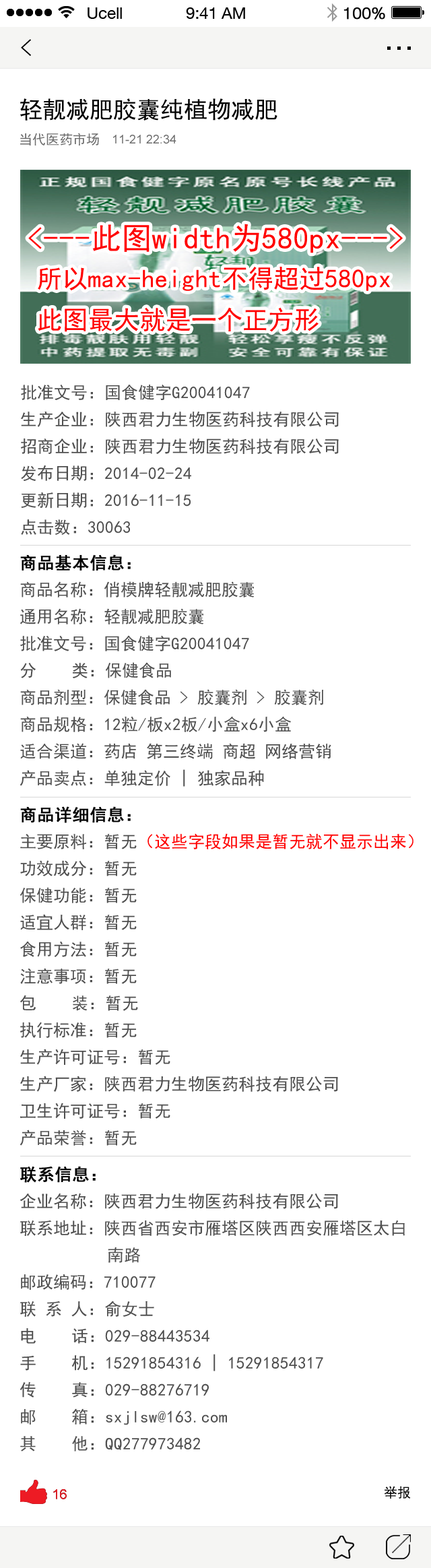
<style>
.page{position:relative;width:431px;height:1568px;background:#ffffff}
.page>*{position:absolute;margin:0}
.t1{font:23.6px "SimHei";color:#000000}
.t2{font:13.5px "SimHei";color:#6d6d6d}
.t3{font:12.1px "ArialMT";color:#6d6d6d}
.t4{font:30.5px "SimHei";color:#ff0000}
.t5{font:25.8px/41.2px "SimHei";color:#ff0000}
.t6{font:16.8px/26.9px "SimHei";color:#4f4f4f}
.t7{font:16.8px/26.9px "SimHei";color:#000000;font-weight:bold}
.t8{font:16.8px/26.9px "SimHei";color:#ff0000}
.t9{font:13.5px "ArialMT";color:#ed1b24}
.t10{font:13.5px "SimHei";color:#000000}
</style>
<div class="page">
<p class="t1" style="left:21px;top:39px;width:10px;height:17px">&lt;</p>
<p class="t1" style="left:20px;top:98px;width:257px;height:23px">轻靓减肥胶囊纯植物减肥</p>
<p class="t2" style="left:20px;top:133px;width:79px;height:12px">当代医药市场</p>
<p class="t3" style="left:113px;top:135px;width:63px;height:9px">11-21 22:34</p>
<p class="t4" style="left:28px;top:224px;width:375px;height:29px">&lt;---此图width为580px---&gt;</p>
<p class="t5" style="left:38px;top:267px;width:352px;height:65px">所以max-height不得超过580px<br>此图最大就是一个正方形</p>
<p class="t6" style="left:20px;top:385px;width:319px;height:150px">批准文号：国食健字G20041047<br>生产企业：陕西君力生物医药科技有限公司<br>招商企业：陕西君力生物医药科技有限公司<br>发布日期：2014-02-24<br>更新日期：2016-11-15<br>点击数：30063</p>
<p class="t6" style="left:20px;top:554px;width:311px;height:233px"><span class="t7">商品基本信息：<br></span>商品名称：俏模牌轻靓减肥胶囊<br>通用名称：轻靓减肥胶囊<br>批准文号：国食健字G20041047<br>分    类：保健食品<br>商品剂型：保健食品 &gt; 胶囊剂 &gt; 胶囊剂<br>商品规格：12粒/板x2板/小盒x6小盒<br>适合渠道：药店 第三终端 商超 网络营销<br>产品卖点：单独定价 | 独家品种</p>
<p class="t6" style="left:20px;top:806px;width:394px;height:340px"><span class="t7">商品详细信息：<br></span>主要原料：暂无<span class="t8">（这些字段如果是暂无就不显示出来）<br></span>功效成分：暂无<br>保健功能：暂无<br>适宜人群：暂无<br>食用方法：暂无<br>注意事项：暂无<br>包    装：暂无<br>执行标准：暂无<br>生产许可证号：暂无<br>生产厂家：陕西君力生物医药科技有限公司<br>卫生许可证号：暂无<br>产品荣誉：暂无</p>
<p class="t6" style="left:20px;top:1166px;width:385px;height:285px"><span class="t7">联系信息：<br></span>企业名称：陕西君力生物医药科技有限公司<br>联系地址：陕西省西安市雁塔区陕西西安雁塔区太白<br>          南路<br>邮政编码：710077<br>联 系 人：俞女士<br>电    话：029-88443534<br>手    机：15291854316 | 15291854317<br>传    真：029-88276719<br>邮    箱：sxjlsw@163.com<br>其    他：QQ277973482</p>
<p class="t9" style="left:53px;top:1489px;width:14px;height:10px">16</p>
<p class="t9" style="left:53px;top:1489px;width:14px;height:10px">16</p>
<p class="t10" style="left:384px;top:1486px;width:27px;height:13px">举报</p>
</div>
